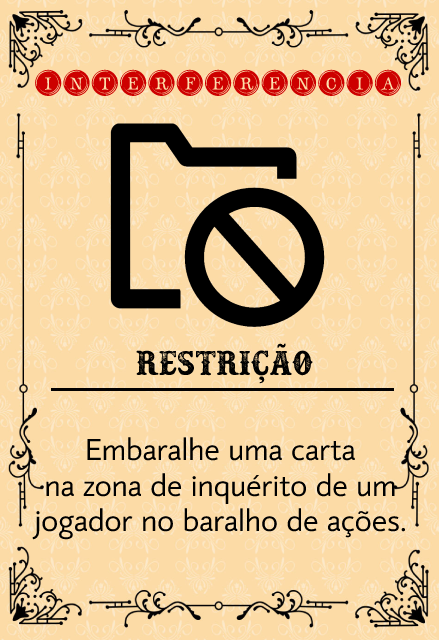
<style>
.page{position:relative;width:439px;height:640px;background:#fcdba6}
.page>*{position:absolute;margin:0}
.t1{font:35px "TypeKeysFilled";color:#cd0000}
.t2{font:38.4px "Docktrin";color:#000000}
.t3{font:29.5px "mirror82";color:#000000}
</style>
<div class="page">
<p class="t1" style="left:35px;top:69px;width:367px;height:27px">interferencia</p>
<p class="t2" style="left:136px;top:343px;width:177px;height:41px">rESTriÇÃO</p>
<p class="t3" style="left:32px;top:437px;width:374px;height:103px;text-align:center">Embaralhe uma carta<br>na zona de inquérito de um<br>jogador no baralho de ações.</p>
</div>
